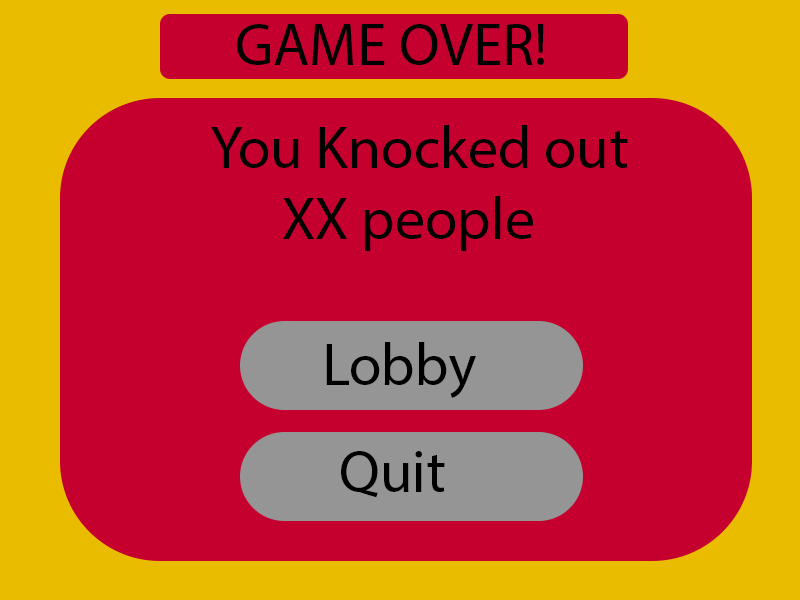
<style>
.page{position:relative;width:800px;height:600px;background:#c5002e}
.page>*{position:absolute;margin:0}
.t1{font:59.3px "MyriadPro-Regular";color:#000000}
</style>
<div class="page">
<p class="t1" style="left:237px;top:24px;width:307px;height:41px">GAME OVER!</p>
<p class="t1" style="left:211px;top:125px;width:417px;height:126px">You Knocked out<br>  XX people</p>
<p class="t1" style="left:326px;top:342px;width:150px;height:56px">Lobby</p>
<p class="t1" style="left:341px;top:451px;width:104px;height:47px">Quit</p>
</div>
